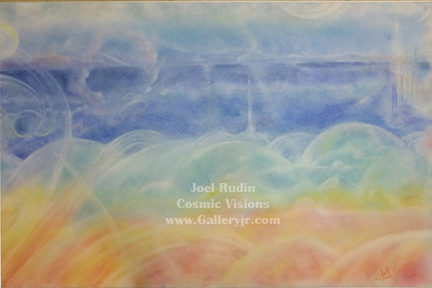
<style>
.page{position:relative;width:432px;height:288px}
.page>*{position:absolute;margin:0}
.t1{font:13.2px "BritannicBold";color:#d3cbb4;scale:1.06 1}
</style>
<div class="page">
<p class="t1" style="left:165px;top:183px;width:115px;height:43px;text-align:center">Joel Rudin<br>Cosmic Visions<br>www.Galleryjr.com</p>
</div>
